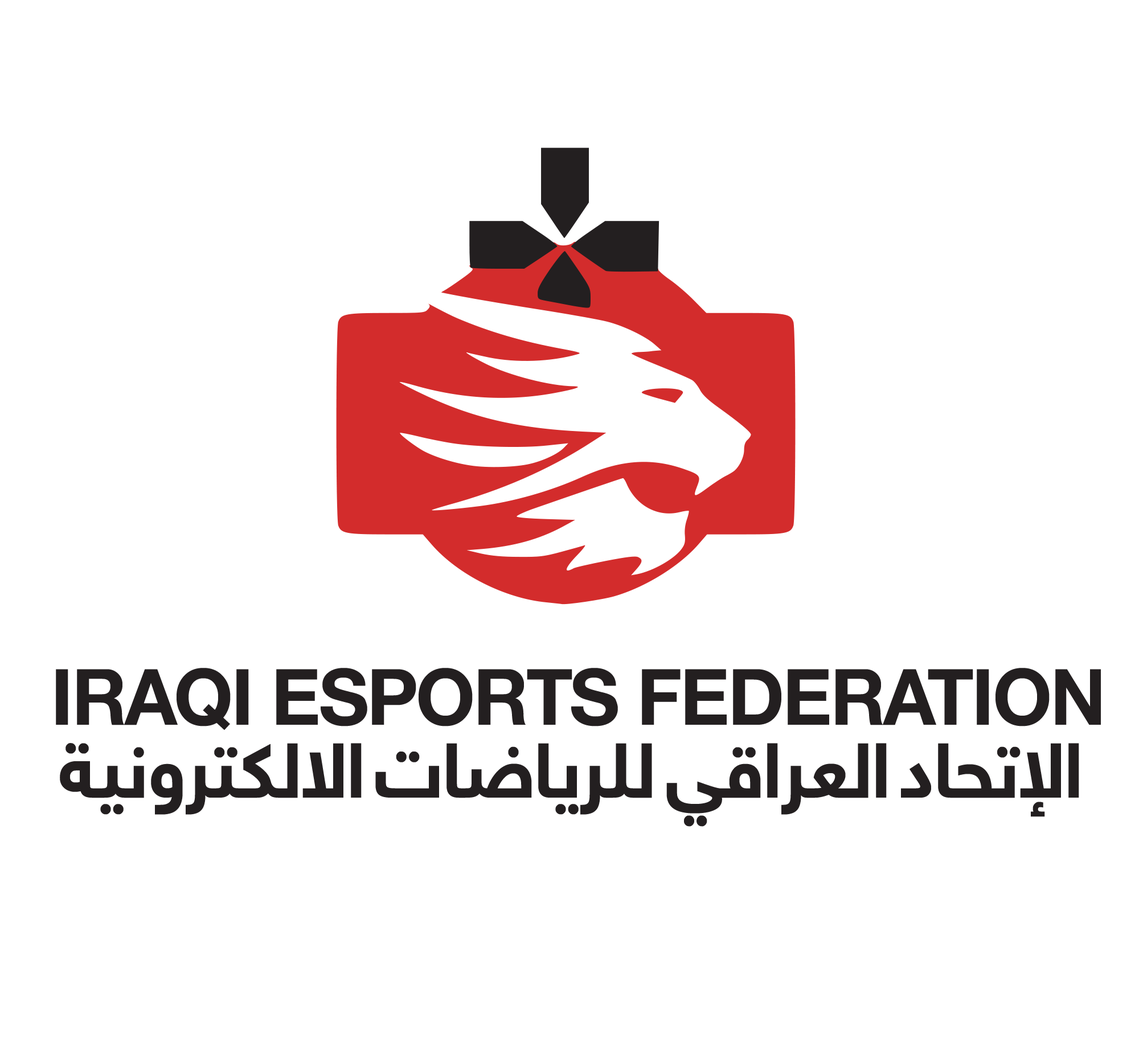
<style>
.page{position:relative;width:1139px;height:1047px;background:#ffffff}
.page>*{position:absolute;margin:0}
.t1{font:77.8px "HelveticaNeueW23foSKY-Bd";letter-spacing:-0.025em;color:#231f20;text-transform:uppercase}
</style>
<div class="page">
<p class="t1" style="left:56px;top:668px;width:1045px;height:63px">iraqi esports federation</p>
<p class="t1" style="left:60px;top:743px;width:1019px;height:84px">الإتحاد العراقي للرياضات الالكترونية</p>
</div>
